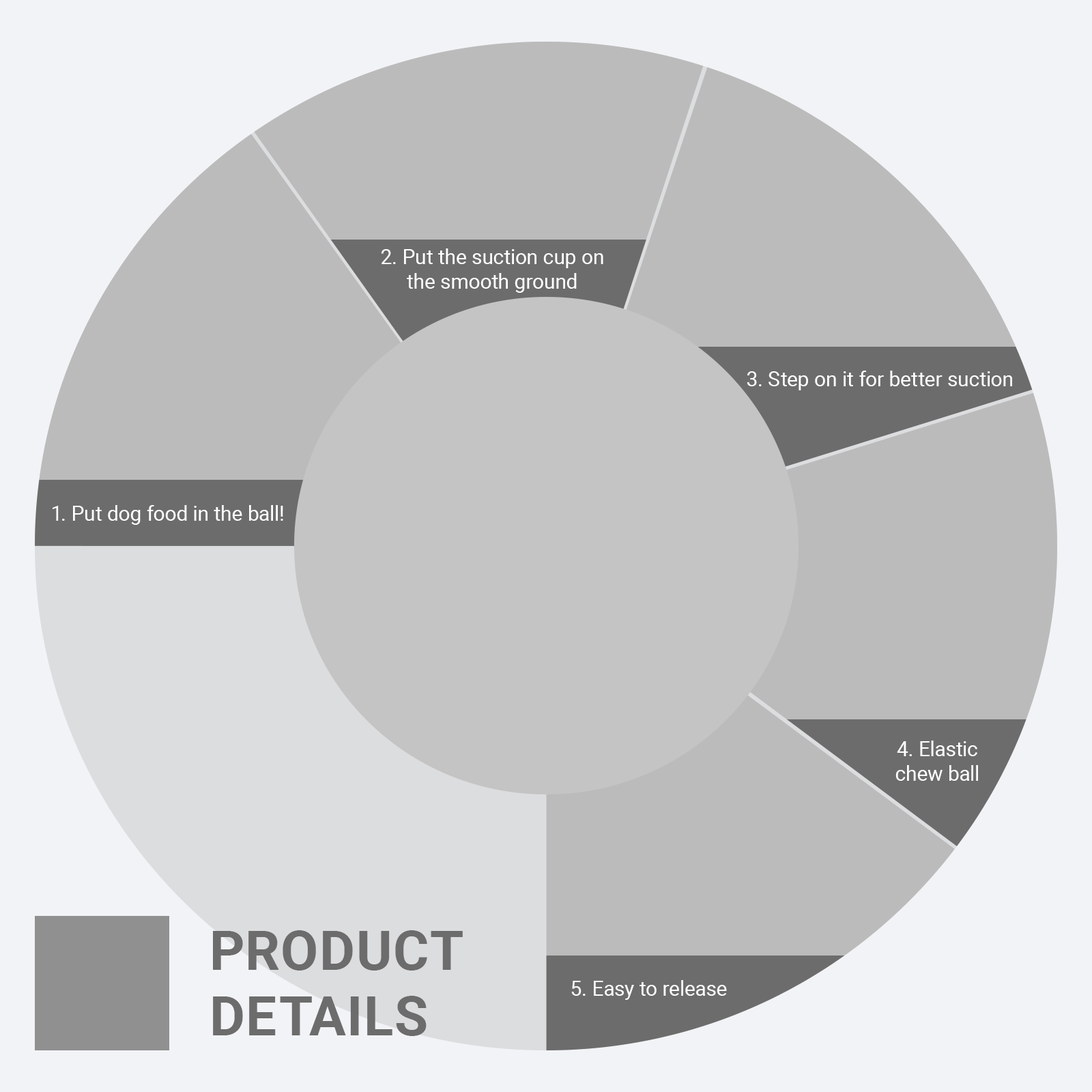
<style>
.page{position:relative;width:1092px;height:1092px;background:#bbbbbb}
.page>*{position:absolute;margin:0}
.t1{font:20.5px "Roboto-Regular";color:#ffffff}
.t2{font:54.6px "Roboto-Bold";color:#6c6c6c;text-transform:uppercase}
</style>
<div class="page">
<p class="t1" style="left:381px;top:248px;width:222px;height:45px;text-align:center">2. Put the suction cup on<br>the smooth ground</p>
<p class="t1" style="left:747px;top:371px;width:265px;height:19px">3. Step on it for better suction</p>
<p class="t1" style="left:53px;top:505px;width:230px;height:20px">1. Put dog food in the ball!</p>
<p class="t1" style="left:895px;top:741px;width:83px;height:40px;text-align:center">4. Elastic<br>chew ball</p>
<p class="t2" style="left:213px;top:930px;width:250px;height:106px">Product<br>details</p>
<p class="t1" style="left:571px;top:980px;width:156px;height:20px">5. Easy to release</p>
</div>
